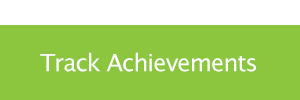
<style>
.page{position:relative;width:300px;height:100px;background:#8cc63f}
.page>*{position:absolute;margin:0}
.t1{font:24px "LucidaGrande";letter-spacing:-0.04em;color:#ffffff}
</style>
<div class="page">
<p class="t1" style="left:40px;top:52px;width:216px;height:20px">Track Achievements</p>
</div>
